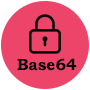
<style>
.page{position:relative;width:90px;height:90px;background:#ed4569}
.page>*{position:absolute;margin:0}
.t1{font:16px "BookmanOldStyle-Bold";color:#000000}
</style>
<div class="page">
<p class="t1" style="left:17px;top:58px;width:60px;height:13px">Base64</p>
</div>
